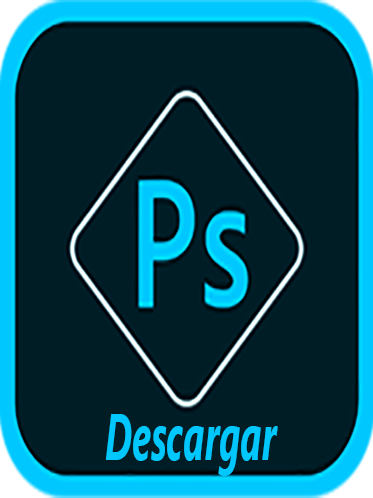
<style>
.page{position:relative;width:373px;height:498px;background:#001d26}
.page>*{position:absolute;margin:0}
.t1{font:64.7px "SegoeUI-BoldItalic";color:#00c8ff;scale:0.56 1}
</style>
<div class="page">
<p class="t1" style="left:105px;top:414px;width:173px;height:62px">Descargar</p>
</div>
